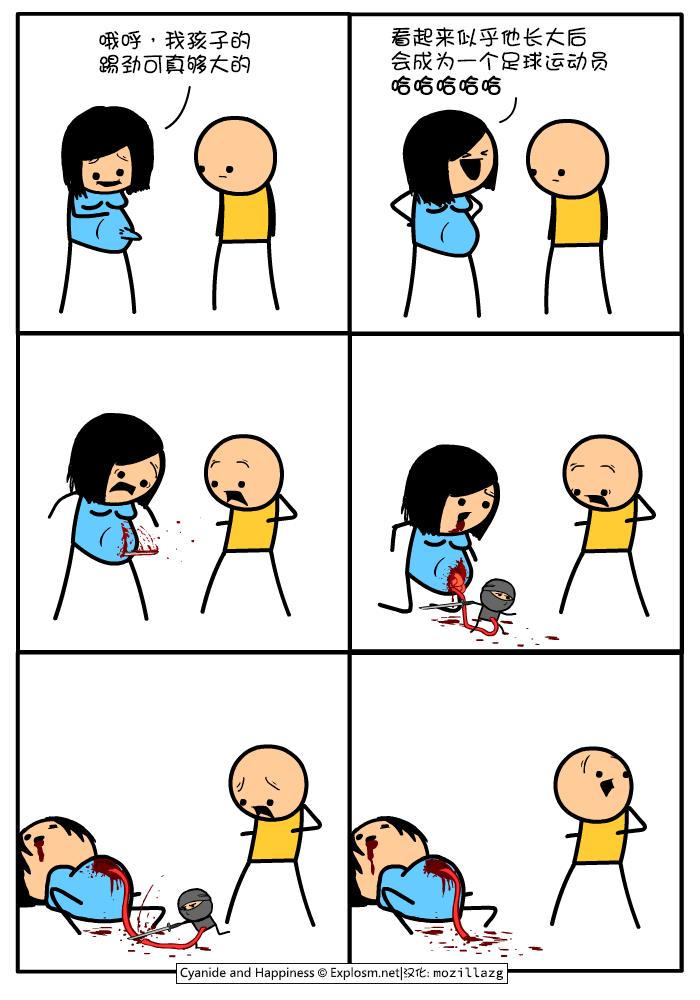
<style>
.page{position:relative;width:700px;height:1000px;background:#ffffff}
.page>*{position:absolute;margin:0}
.t1{font:22px/24px "DFGirl";color:#000000}
.t2{font:22px/24px "DFGirl";color:#000000;font-weight:bold}
</style>
<div class="page">
<p class="t1" style="left:99px;top:30px;width:151px;height:44px">哦呼，我孩子的<br>踢劲可真够大的</p>
<p class="t1" style="left:391px;top:27px;width:217px;height:68px">看起来似乎他长大后<br>会成为一个足球运动员<br><span class="t2">哈哈哈哈哈</span></p>
</div>
